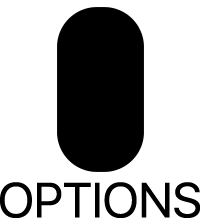
<style>
.page{position:relative;width:200px;height:218px;background:#ffffff}
.page>*{position:absolute;margin:0}
.t1{font:49px "SFUIDisplay-Regular";color:#000000}
</style>
<div class="page">
<p class="t1" style="left:0px;top:182px;width:201px;height:36px">OPTIONS</p>
</div>
